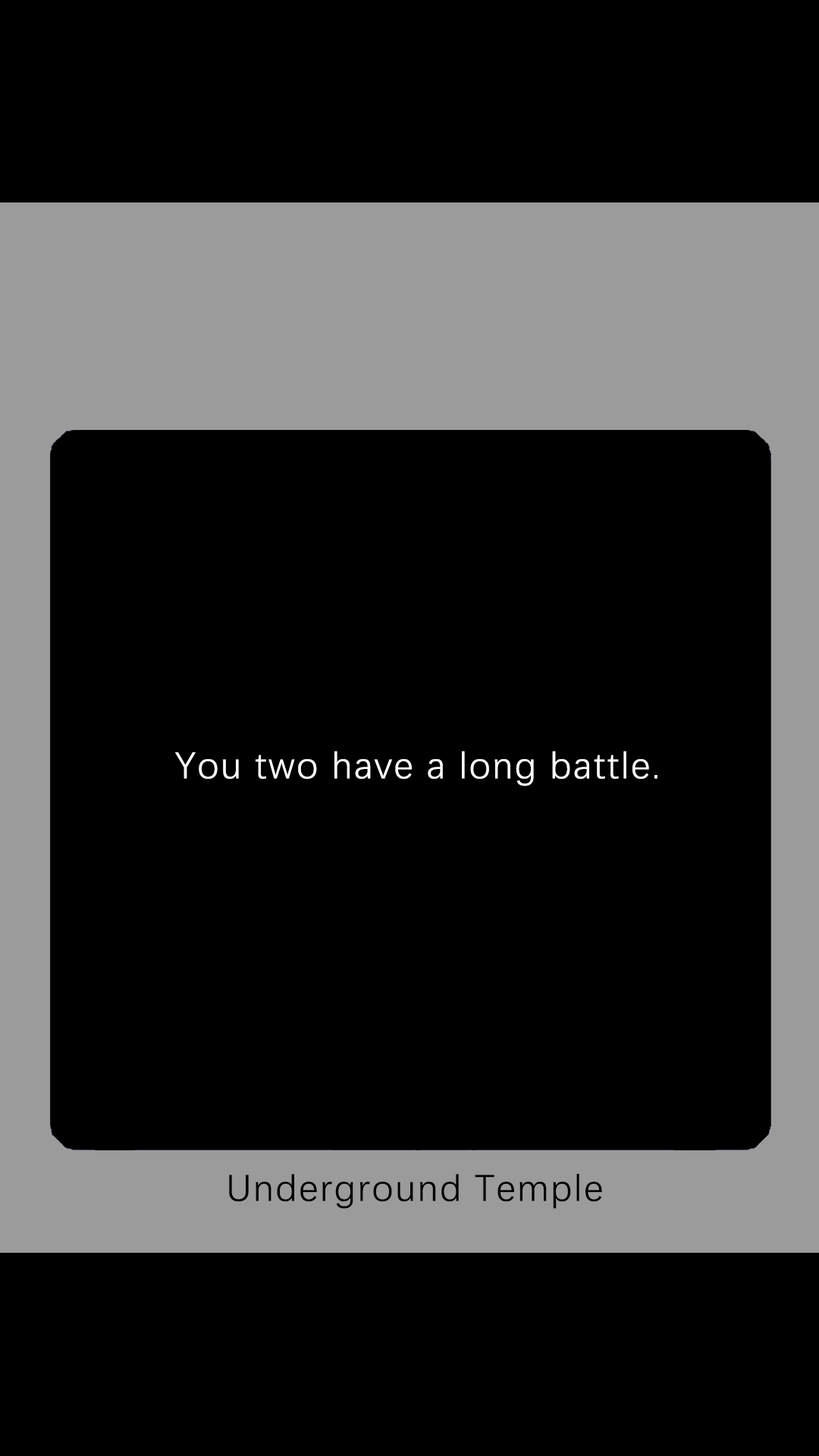
<style>
.page{position:relative;width:819px;height:1456px;background:#000000}
.page>*{position:absolute;margin:0}
.t1{font:37.9px "DengXian-Regular";letter-spacing:0.04em;color:#ffffff}
.t2{font:37.9px "DengXian-Regular";letter-spacing:0.04em;color:#000000}
</style>
<div class="page">
<p class="t1" style="left:175px;top:751px;width:482px;height:35px">You two have a long battle.</p>
<p class="t2" style="left:229px;top:1174px;width:373px;height:35px">Underground Temple</p>
</div>
